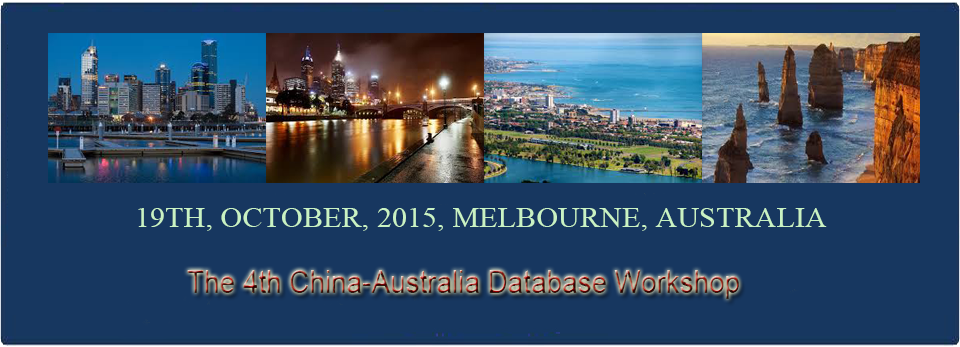
<style>
.page{position:relative;width:960px;height:347px;background:#173760}
.page>*{position:absolute;margin:0}
.t1{font:28.3px "TimesNewRomanPSMT";color:#c9f2c3;scale:1.07 1}
.t2{font:32px "ArialMT";scale:0.87 1}
</style>
<div class="page">
<p class="t1" style="left:138px;top:208px;width:689px;height:23px">19TH, OCTOBER, 2015, MELBOURNE, AUSTRALIA AAUSTAAAUSTRALIA</p>
<p class="t2" style="left:187px;top:270px;width:552px;height:29px">The 4th China-Australia Database Workshop</p>
</div>
